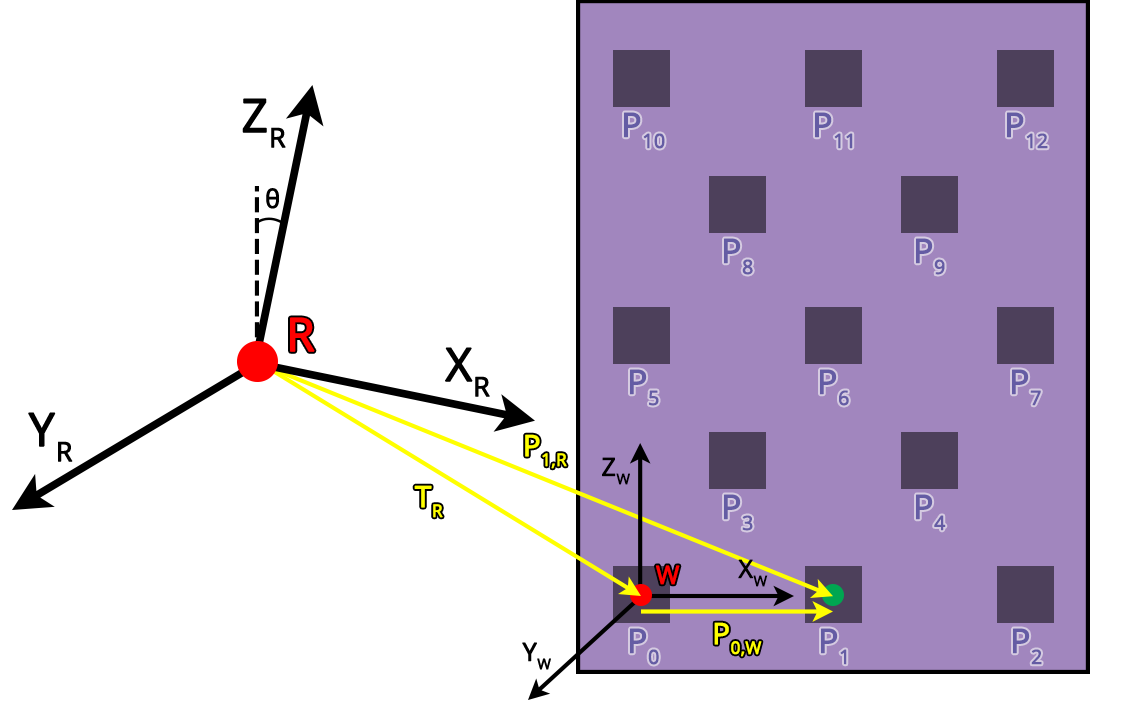
<style>
.page{position:relative;width:1147px;height:720px;background:#ffffff}
.page>*{position:absolute;margin:0}
.t1{font:45.8px "OpenSans";color:#000000;font-weight:bold}
.t2{font:33.3px "OpenSans";color:#645ca4;font-weight:bold}
.t3{font:25px "OpenSans";color:#000000;font-weight:bold}
.t4{font:45.8px "OpenSans";color:#ff0000;font-weight:bold}
.t5{font:29.2px "OpenSans";color:#ffff00;font-weight:bold}
.t6{font:25px "OpenSans";color:#ff0000;font-weight:bold}
</style>
<div class="page">
<p class="t1" style="left:242px;top:98px;width:44px;height:50px">ZR</p>
<p class="t2" style="left:624px;top:112px;width:41px;height:37px">P10</p>
<p class="t2" style="left:815px;top:112px;width:38px;height:37px">P11</p>
<p class="t2" style="left:1007px;top:112px;width:41px;height:37px">P12</p>
<p class="t3" style="left:266px;top:188px;width:13px;height:21px">θ</p>
<p class="t2" style="left:724px;top:238px;width:29px;height:37px">P8</p>
<p class="t2" style="left:916px;top:238px;width:29px;height:37px">P9</p>
<p class="t4" style="left:290px;top:317px;width:25px;height:35px">R</p>
<p class="t1" style="left:445px;top:347px;width:45px;height:50px">XR</p>
<p class="t2" style="left:630px;top:369px;width:29px;height:37px">P5</p>
<p class="t2" style="left:820px;top:369px;width:29px;height:37px">P6</p>
<p class="t2" style="left:1012px;top:369px;width:29px;height:37px">P7</p>
<p class="t1" style="left:28px;top:412px;width:45px;height:50px">YR</p>
<p class="t5" style="left:525px;top:434px;width:42px;height:35px">P1,R</p>
<p class="t3" style="left:602px;top:457px;width:28px;height:28px">ZW</p>
<p class="t5" style="left:414px;top:485px;width:29px;height:33px">TR</p>
<p class="t2" style="left:724px;top:494px;width:29px;height:37px">P3</p>
<p class="t2" style="left:916px;top:494px;width:30px;height:37px">P4</p>
<p class="t6" style="left:656px;top:565px;width:24px;height:20px">W</p>
<p class="t3" style="left:738px;top:559px;width:30px;height:28px">XW</p>
<p class="t2" style="left:630px;top:628px;width:29px;height:37px">P0</p>
<p class="t5" style="left:714px;top:622px;width:48px;height:35px">P0,W</p>
<p class="t2" style="left:821px;top:628px;width:26px;height:37px">P1</p>
<p class="t2" style="left:1013px;top:628px;width:29px;height:37px">P2</p>
<p class="t3" style="left:522px;top:642px;width:29px;height:28px">YW</p>
</div>
